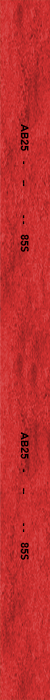
<style>
.page{position:relative;width:50px;height:700px}
.page>*{position:absolute;margin:0}
.t1{font:10.6px "Avenir-Black";color:#000000;text-transform:uppercase}
</style>
<div class="page">
<p class="t1" style="left:20px;top:124px;width:9px;height:128px;rotate:90deg">ab25   -     --         - -   85s</p>
<p class="t1" style="left:20px;top:432px;width:9px;height:128px;rotate:90deg">ab25   -     --         - -   85s</p>
</div>
